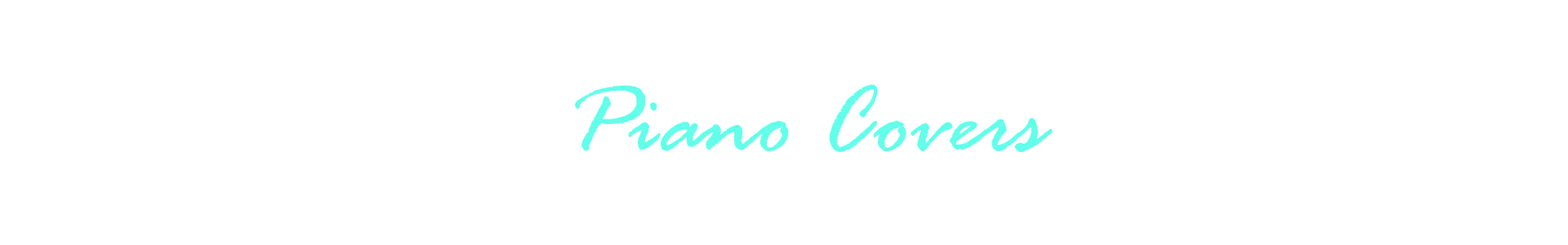
<style>
.page{position:relative;width:1568px;height:245px;background:#ffffff}
.page>*{position:absolute;margin:0}
.t1{font:102.1px "RageItalic";color:#62ffeb}
</style>
<div class="page">
<p class="t1" style="left:575px;top:84px;width:478px;height:69px">Piano Covers</p>
</div>
